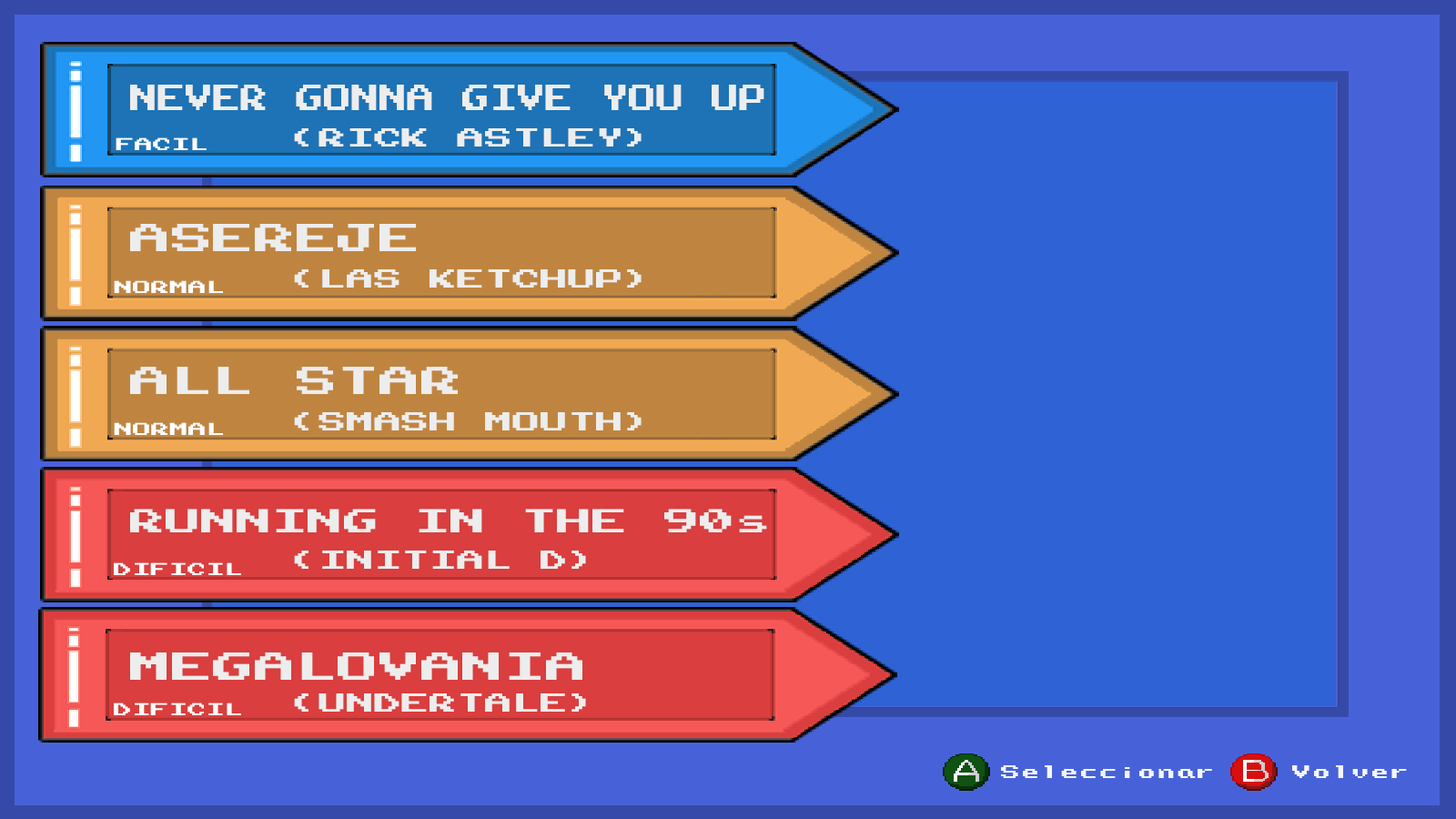
<style>
.page{position:relative;width:1456px;height:819px;background:#2f62d4}
.page>*{position:absolute;margin:0}
.t1{font:29.1px "NES-Chimera";color:#ededed;scale:0.95 1}
.t2{font:13.9px "NES-Chimera";color:#ffffff;scale:1.33 1}
.t3{font:20.8px "NES-Chimera";color:#ededed;scale:1.33 1}
.t4{font:31.2px "NES-Chimera";color:#ededed;scale:1.33 1}
.t5{font:26.7px "NES-Chimera";color:#ededed;scale:1.33 1}
.t6{font:14.6px "NES-Chimera";color:#f4f6ff;scale:1.33 1}
</style>
<div class="page">
<p class="t1" style="left:130px;top:85px;width:634px;height:25px">NEVER GONNA GIVE YOU UP</p>
<p class="t2" style="left:116px;top:137px;width:91px;height:13px">FACIL</p>
<p class="t3" style="left:294px;top:128px;width:348px;height:19px">(RICK ASTLEY)</p>
<p class="t4" style="left:130px;top:224px;width:286px;height:27px">ASEREJE</p>
<p class="t3" style="left:294px;top:269px;width:348px;height:19px">(LAS KETCHUP)</p>
<p class="t2" style="left:114px;top:280px;width:109px;height:13px">NORMAL</p>
<p class="t4" style="left:130px;top:367px;width:328px;height:27px">ALL STAR</p>
<p class="t3" style="left:294px;top:412px;width:348px;height:18px">(SMASH MOUTH)</p>
<p class="t2" style="left:114px;top:422px;width:109px;height:13px">NORMAL</p>
<p class="t5" style="left:130px;top:509px;width:637px;height:23px">RUNNING IN THE 90s</p>
<p class="t3" style="left:294px;top:551px;width:292px;height:18px">(INITIAL D)</p>
<p class="t2" style="left:114px;top:562px;width:127px;height:13px">DIFICIL</p>
<p class="t4" style="left:130px;top:652px;width:452px;height:28px">MEGALOVANIA</p>
<p class="t3" style="left:294px;top:693px;width:292px;height:19px">(UNDERTALE)</p>
<p class="t2" style="left:114px;top:703px;width:127px;height:12px">DIFICIL</p>
<p class="t6" style="left:1001px;top:765px;width:211px;height:13px">Seleccionar</p>
<p class="t6" style="left:1292px;top:765px;width:115px;height:13px">Volver</p>
</div>
